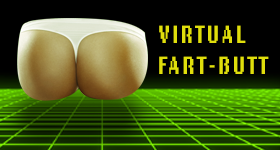
<style>
.page{position:relative;width:280px;height:150px;background:#000000}
.page>*{position:absolute;margin:0}
.t1{font:25.6px/31.2px "LoRes12OT-BoldAltOakland";letter-spacing:0.1em;color:#e0de0c;scale:0.74 1}
</style>
<div class="page">
<p class="t1" style="left:159px;top:25px;width:110px;height:49px">VIRTUAL<br>FART-BUTT</p>
</div>
